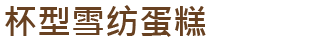
<style>
.page{position:relative;width:333px;height:43px;background:#ffffff}
.page>*{position:absolute;margin:0}
.t1{font:34px "MicrosoftJhengHeiBold";color:#684121}
</style>
<div class="page">
<p class="t1" style="left:5px;top:5px;width:201px;height:32px">杯型雪纺蛋糕</p>
</div>
